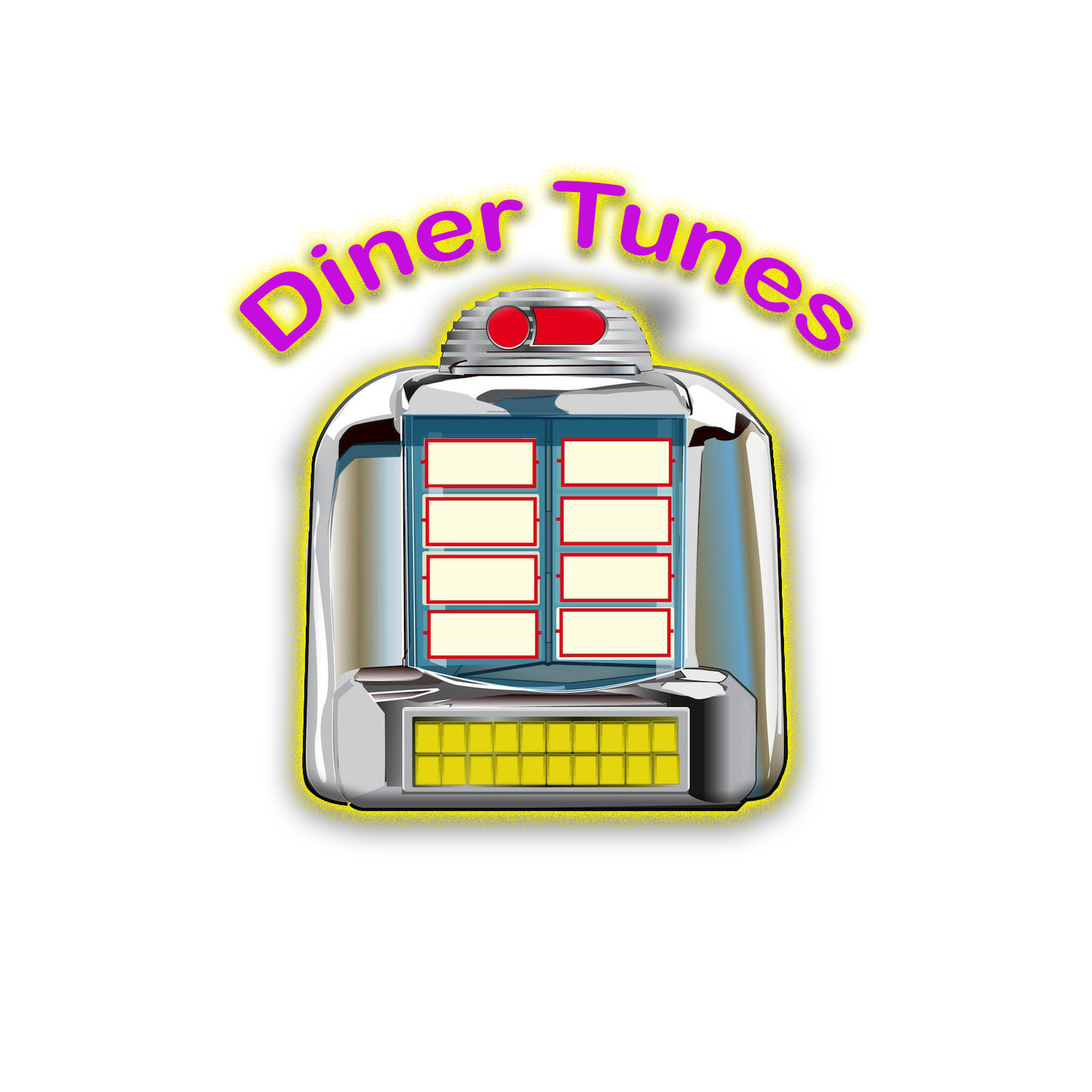
<style>
.page{position:relative;width:1092px;height:1092px;background:#ffffff}
.page>*{position:absolute;margin:0}
.t1{font:91px "ArialRoundedMTBold";color:#c60ddf}
</style>
<div class="page">
<p class="t1" style="left:240px;top:181px;width:613px;height:171px;text-align:center">Diner Tunes</p>
</div>
